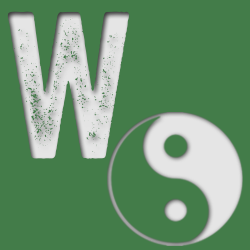
<style>
.page{position:relative;width:250px;height:250px;background:#437c49}
.page>*{position:absolute;margin:0}
.t1{font:202.2px "Veneer";color:#e5e5e5}
</style>
<div class="page">
<p class="t1" style="left:7px;top:11px;width:123px;height:148px">W</p>
</div>
